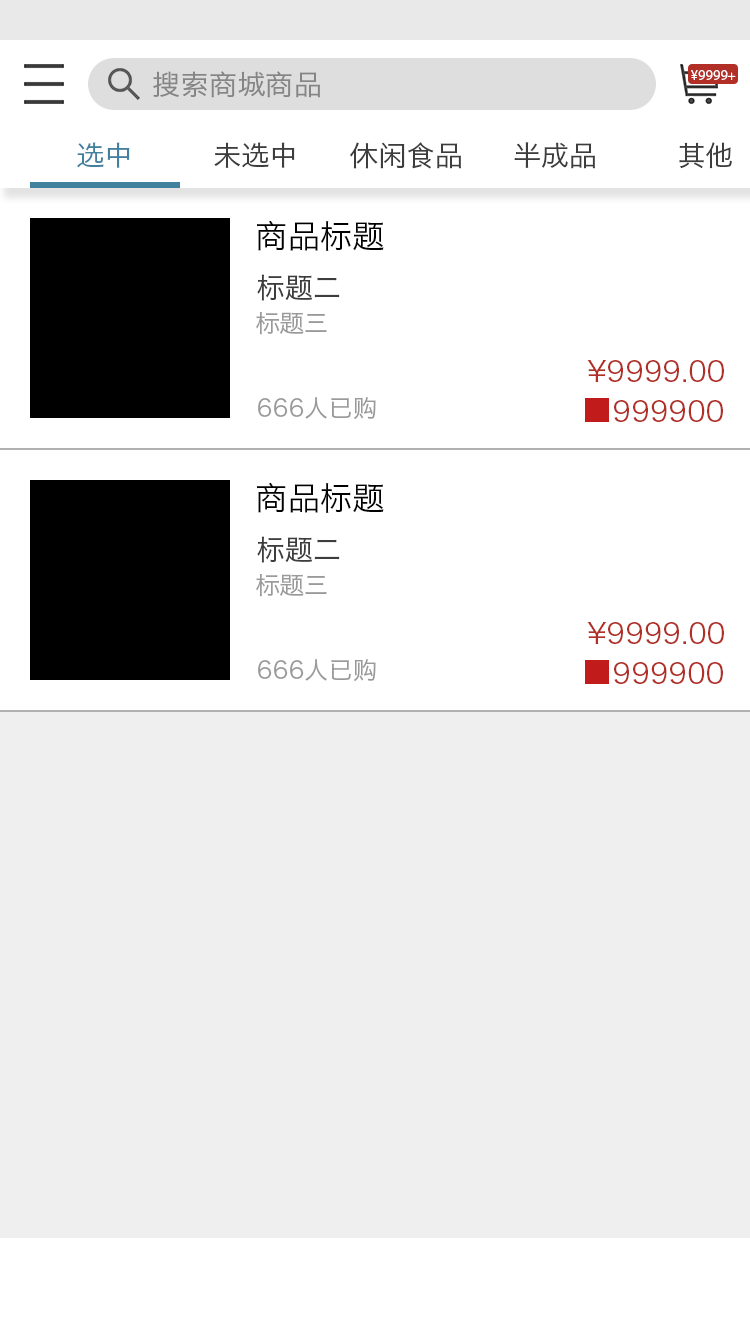
<style>
.page{position:relative;width:750px;height:1334px;background:#ffffff}
.page>*{position:absolute;margin:0}
.t1{font:28px "HiraginoSansGB-W3";color:#858585}
.t2{font:14px "MyriadPro-Regular";letter-spacing:0.01em;color:#ffffff}
.t3{font:28px "HiraginoSansGB-W3";color:#42819d}
.t4{font:28px "HiraginoSansGB-W3";color:#3d3d3d}
.t5{font:32px "HiraginoSansGB-W3";color:#000000}
.t6{font:24px "HiraginoSansGB-W3";color:#9a9a9a}
.t7{font:28px "HiraginoSansGB-W3";color:#b12f27}
</style>
<div class="page">
<p class="t1" style="left:153px;top:71px;width:167px;height:27px">搜索商城商品</p>
<p class="t2" style="left:691px;top:70px;width:45px;height:10px">¥9999+</p>
<p class="t3" style="left:77px;top:142px;width:53px;height:26px">选中</p>
<p class="t4" style="left:214px;top:142px;width:81px;height:26px">未选中</p>
<p class="t4" style="left:350px;top:142px;width:111px;height:27px">休闲食品</p>
<p class="t4" style="left:514px;top:142px;width:81px;height:27px">半成品</p>
<p class="t4" style="left:679px;top:142px;width:53px;height:27px">其他</p>
<p class="t5" style="left:257px;top:220px;width:127px;height:31px">商品标题</p>
<p class="t4" style="left:257px;top:274px;width:83px;height:27px">标题二</p>
<p class="t6" style="left:256px;top:312px;width:71px;height:23px">标题三</p>
<p class="t7" style="left:587px;top:360px;width:137px;height:22px">¥9999.00</p>
<p class="t6" style="left:258px;top:397px;width:118px;height:23px">666人已购</p>
<p class="t7" style="left:614px;top:400px;width:109px;height:22px">999900</p>
</div>
